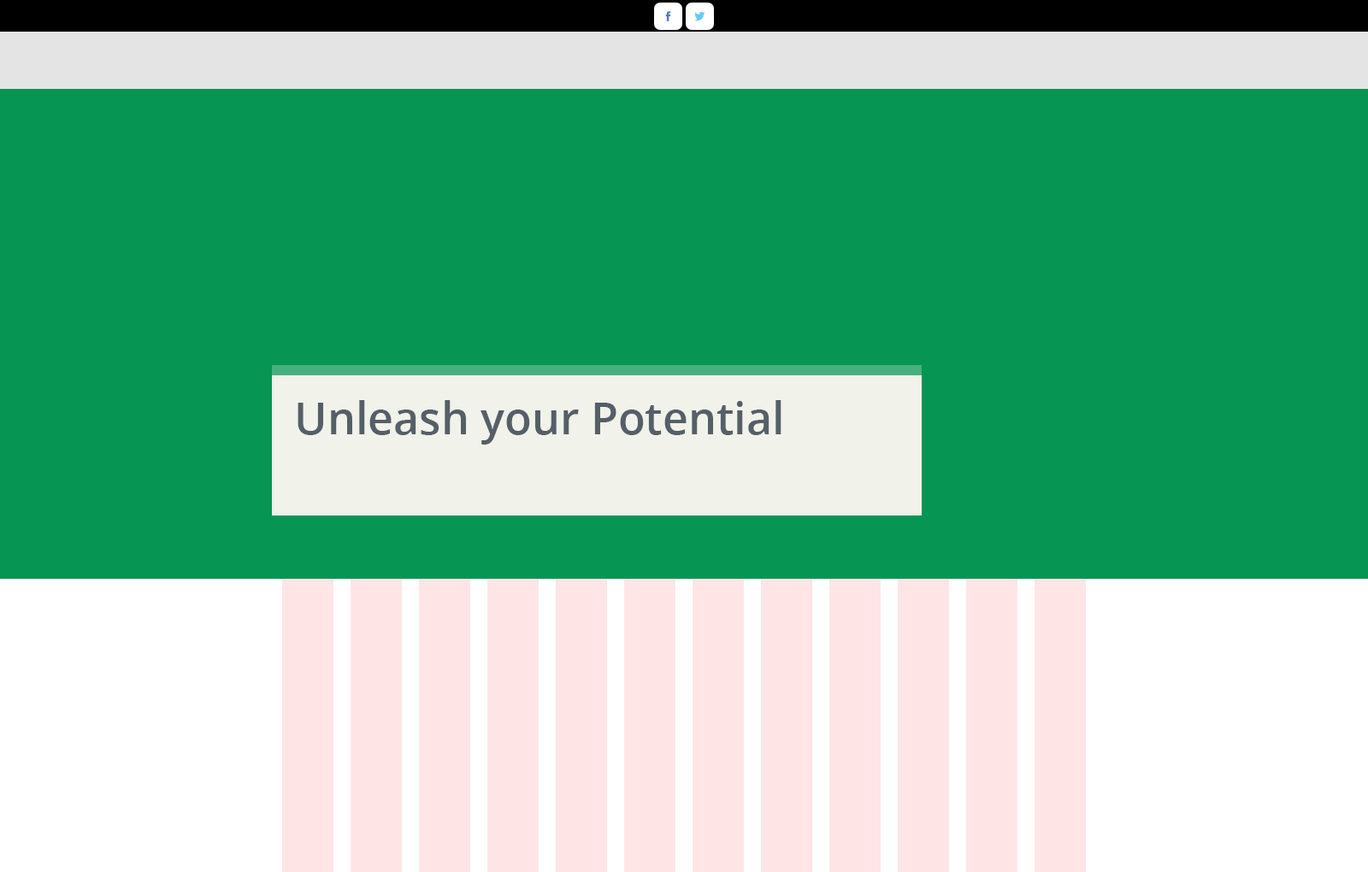
<style>
.page{position:relative;width:1368px;height:872px;background:#069553}
.page>*{position:absolute;margin:0}
.t1{font:44.4px "OpenSans-Semibold";color:#555f68}
</style>
<div class="page">
<p class="t1" style="left:297px;top:400px;width:484px;height:44px">Unleash your Potential</p>
</div>
